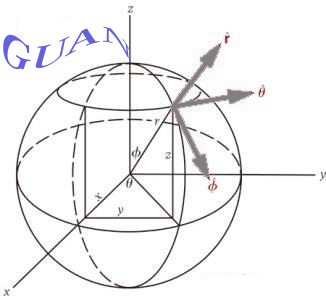
<style>
.page{position:relative;width:326px;height:300px;background:#ffffff}
.page>*{position:absolute;margin:0}
.t1{font:29.5px "YouYuan";color:#6361dc;scale:2.19 1}
</style>
<div class="page">
<p class="t1" style="left:3px;top:26px;width:127px;height:44px;rotate:9deg">GUAN</p>
</div>
